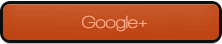
<style>
.page{position:relative;width:222px;height:44px}
.page>*{position:absolute;margin:0}
.t1{font:18px "WalkwayUltraBold";color:#fcac8a}
</style>
<div class="page">
<p class="t1" style="left:82px;top:15px;width:65px;height:17px">Google+</p>
</div>
